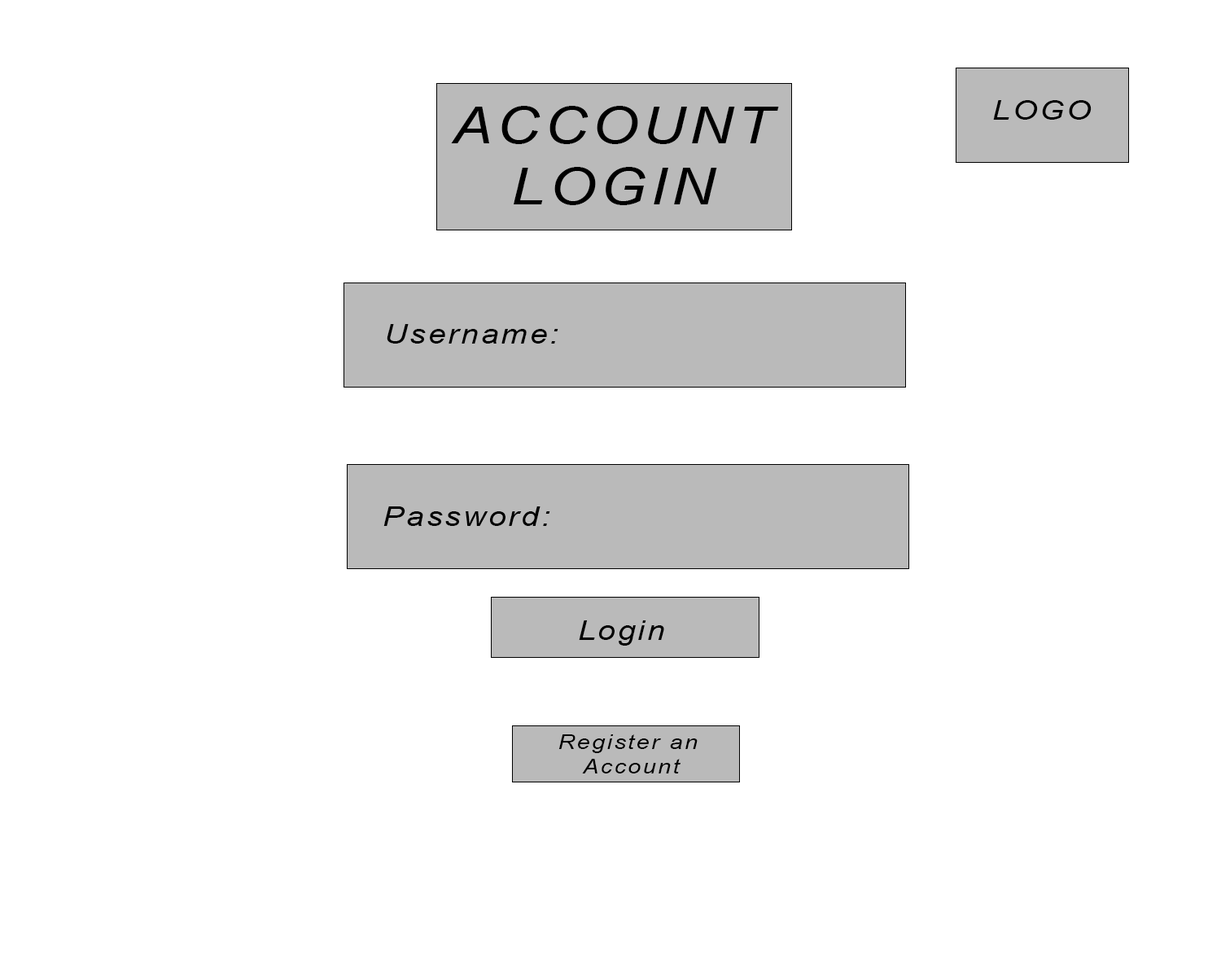
<style>
.page{position:relative;width:1221px;height:977px;background:#ffffff}
.page>*{position:absolute;margin:0}
.t1{font:27.1px "Arial-ItalicMT";letter-spacing:0.08em;color:#000000;scale:1.16 1}
.t2{font:50.9px "Arial-ItalicMT";letter-spacing:0.08em;color:#000000;scale:1.16 1}
.t3{font:20.3px "Arial-ItalicMT";letter-spacing:0.08em;color:#000000;scale:1.16 1}
</style>
<div class="page">
<p class="t1" style="left:993px;top:100px;width:98px;height:20px">LOGO</p>
<p class="t2" style="left:451px;top:106px;width:328px;height:99px;text-align:center">ACCOUNT<br>LOGIN</p>
<p class="t1" style="left:387px;top:324px;width:171px;height:19px">Username:</p>
<p class="t1" style="left:383px;top:506px;width:167px;height:20px">Password:</p>
<p class="t1" style="left:579px;top:620px;width:85px;height:25px">Login</p>
<p class="t3" style="left:558px;top:734px;width:140px;height:39px;text-align:center">Register an <br>Account</p>
</div>
